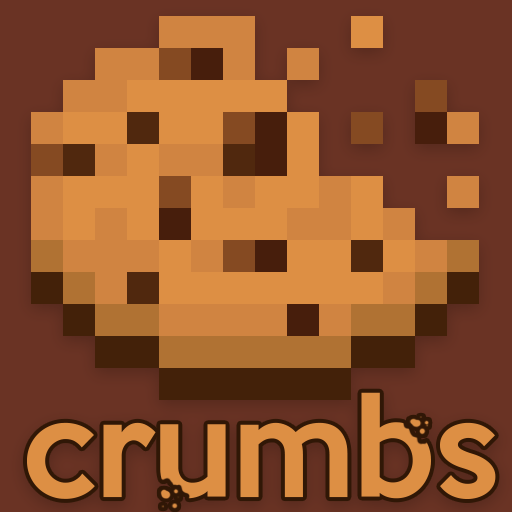
<style>
.page{position:relative;width:512px;height:512px;background:#6a3324}
.page>*{position:absolute;margin:0}
.t1{font:125px "KeepCalm-Medium";color:#dd8f44}
</style>
<div class="page">
<p class="t1" style="left:27px;top:392px;width:469px;height:107px">crumbs</p>
</div>
